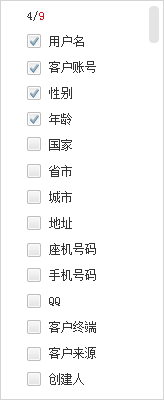
<style>
.page{position:relative;width:164px;height:400px;background:#ffffff}
.page>*{position:absolute;margin:0}
.t1{font:12px "SimSun";color:#333333}
.t2{font:12px "SimSun";color:#c81623}
.t3{font:12px/26px "SimSun";color:#333333}
</style>
<div class="page">
<p class="t1" style="left:27px;top:11px;width:17px;height:10px">4/<span class="t2">9</span></p>
<p class="t3" style="left:49px;top:35px;width:47px;height:350px">用户名<br>客户账号<br>性别<br>年龄<br>国家<br>省市<br>城市<br>地址<br>座机号码<br>手机号码<br>QQ<br>客户终端<br>客户来源<br>创建人</p>
</div>
